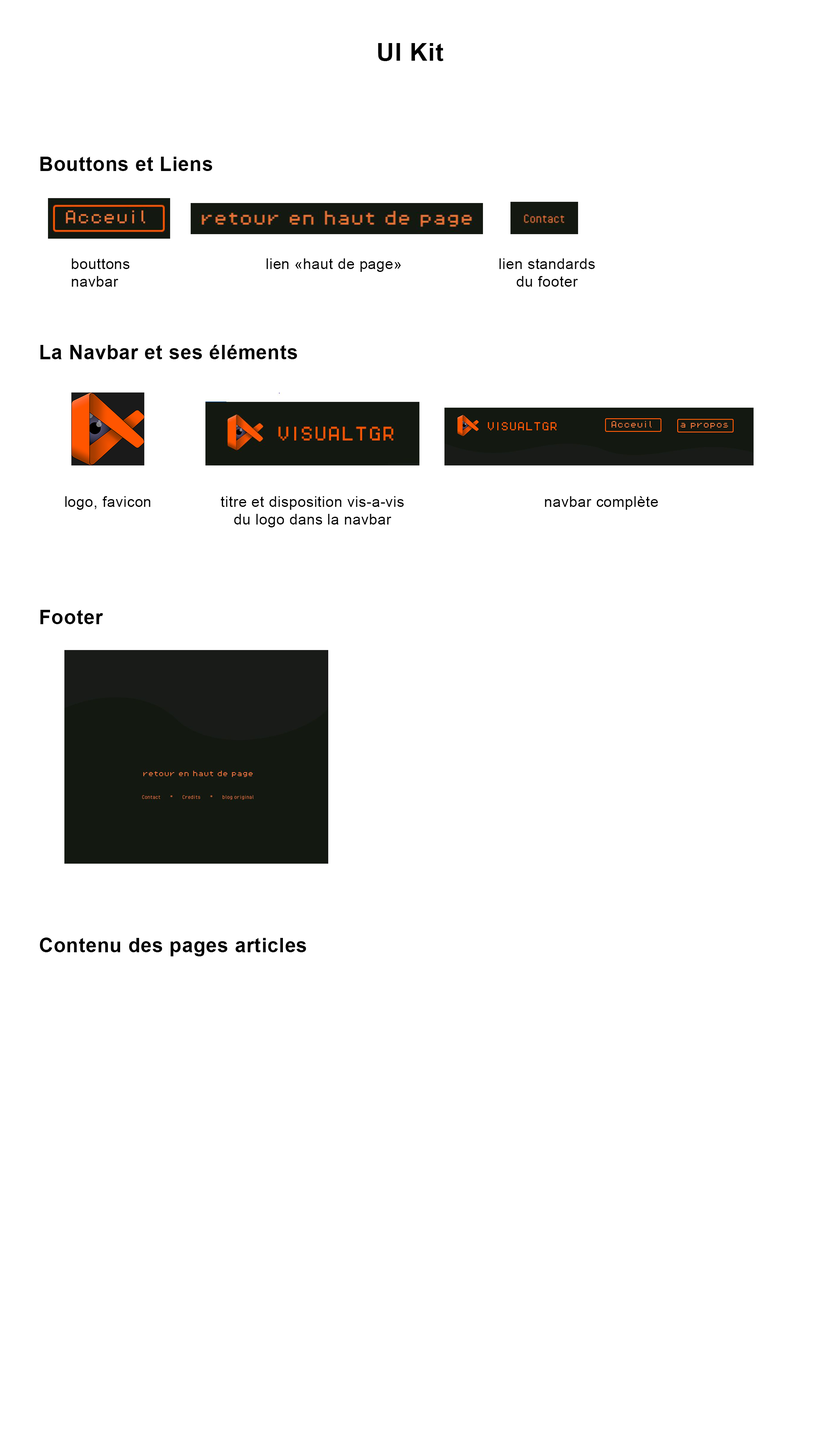
<style>
.page{position:relative;width:820px;height:1453px;background:#ffffff}
.page>*{position:absolute;margin:0}
.t1{font:24.6px "Arial-BoldMT";letter-spacing:0.025em;color:#000000}
.t2{font:19.7px "Arial-BoldMT";letter-spacing:0.025em;color:#000000}
.t3{font:14.8px "ArialMT";letter-spacing:0.025em;color:#000000}
</style>
<div class="page">
<p class="t1" style="left:378px;top:43px;width:66px;height:18px">UI Kit</p>
<p class="t2" style="left:40px;top:157px;width:172px;height:14px">Bouttons et Liens</p>
<p class="t3" style="left:72px;top:258px;width:58px;height:29px">bouttons navbar</p>
<p class="t3" style="left:267px;top:258px;width:134px;height:14px">lien «haut de page»</p>
<p class="t3" style="left:500px;top:258px;width:95px;height:29px;text-align:center">lien standards du footer</p>
<p class="t2" style="left:40px;top:345px;width:257px;height:14px">La Navbar et ses éléments</p>
<p class="t3" style="left:65px;top:496px;width:86px;height:14px">logo, favicon</p>
<p class="t3" style="left:221px;top:496px;width:183px;height:32px;text-align:center">titre et disposition vis-a-vis du logo dans la navbar</p>
<p class="t3" style="left:545px;top:496px;width:113px;height:14px">navbar complète</p>
<p class="t2" style="left:40px;top:610px;width:63px;height:14px">Footer</p>
<p class="t2" style="left:40px;top:938px;width:266px;height:19px">Contenu des pages articles</p>
</div>
